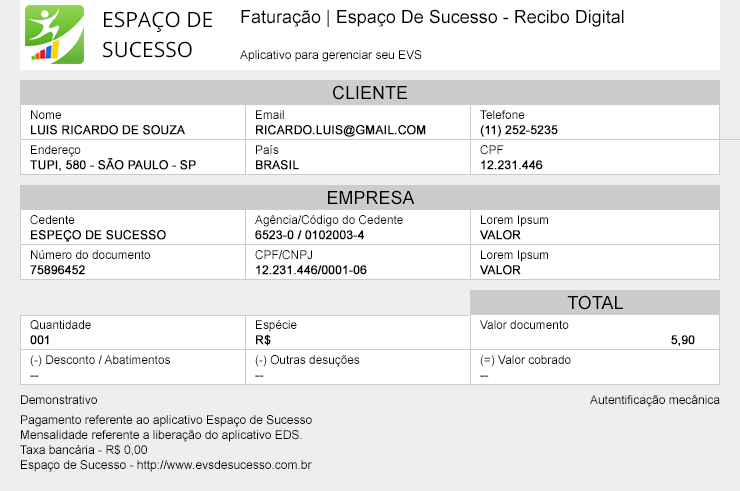
<style>
.page{position:relative;width:740px;height:491px;background:#ffffff}
.page>*{position:absolute;margin:0}
.t1{font:21px/30px "OpenSans";color:#000000;text-transform:uppercase}
.t2{font:18px "ArialMT";color:#000000}
.t3{font:12px "ArialMT";color:#000000}
.t4{font:18px "ArialMT";color:#000000;text-transform:uppercase}
.t5{font:12px/15px "ArialMT";color:#000000;text-transform:uppercase;font-weight:bold}
.t6{font:12px/12px "ArialMT";color:#000000}
.t7{font:12px/15px "ArialMT";color:#000000}
</style>
<div class="page">
<p class="t1" style="left:103px;top:11px;width:109px;height:47px">Espaço de <br>Sucesso</p>
<p class="t2" style="left:241px;top:9px;width:383px;height:18px">Faturação | Espaço De Sucesso - Recibo Digital</p>
<p class="t3" style="left:240px;top:50px;width:182px;height:12px">Aplicativo para gerenciar seu EVS</p>
<p class="t4" style="left:333px;top:85px;width:74px;height:15px">CLIENTE</p>
<p class="t5" style="left:31px;top:110px;width:154px;height:25px"><span class="t6">Nome<br></span>Luis ricardo de souza</p>
<p class="t5" style="left:256px;top:110px;width:170px;height:27px"><span class="t6">Email<br></span>ricardo.luis@gmail.com</p>
<p class="t5" style="left:480px;top:110px;width:78px;height:27px"><span class="t6">Telefone<br></span>(11) 252-5235</p>
<p class="t5" style="left:30px;top:145px;width:166px;height:26px"><span class="t6">Endereço<br></span>Tupi, 580 - São Paulo - SP</p>
<p class="t5" style="left:256px;top:145px;width:43px;height:25px"><span class="t6">País<br></span>Brasil</p>
<p class="t5" style="left:480px;top:145px;width:63px;height:25px"><span class="t6">CPF<br></span>12.231.446</p>
<p class="t4" style="left:328px;top:190px;width:87px;height:15px">Empresa</p>
<p class="t5" style="left:30px;top:215px;width:136px;height:27px"><span class="t6">Cedente<br></span>Espeço de Sucesso</p>
<p class="t6" style="left:255px;top:215px;width:148px;height:25px">Agência/Código do Cedente<br><span class="t5">6523-0 / 0102003-4</span></p>
<p class="t6" style="left:480px;top:215px;width:68px;height:25px">Lorem Ipsum<br><span class="t5">Valor</span></p>
<p class="t6" style="left:30px;top:250px;width:120px;height:25px">Número do documento<br><span class="t5">75896452</span></p>
<p class="t5" style="left:255px;top:250px;width:112px;height:25px"><span class="t6">CPF/CNPJ<br></span>12.231.446/0001-06</p>
<p class="t6" style="left:480px;top:250px;width:68px;height:25px">Lorem Ipsum<br><span class="t5">Valor</span></p>
<p class="t4" style="left:567px;top:295px;width:56px;height:15px">total</p>
<p class="t6" style="left:30px;top:320px;width:61px;height:25px">Quantidade<br><span class="t5">001</span></p>
<p class="t6" style="left:256px;top:320px;width:41px;height:26px">Espécie<br><span class="t5">R$</span></p>
<p class="t6" style="left:480px;top:320px;width:215px;height:26px">Valor documento<br><span class="t5">5,90</span></p>
<p class="t6" style="left:30px;top:355px;width:140px;height:22px">(-) Desconto / Abatimentos<br><span class="t5">--</span></p>
<p class="t6" style="left:255px;top:355px;width:105px;height:22px">(-) Outras desuções<br><span class="t5">--</span></p>
<p class="t6" style="left:480px;top:355px;width:91px;height:22px">(=) Valor cobrado<br><span class="t5">--</span></p>
<p class="t3" style="left:21px;top:395px;width:76px;height:9px">Demonstrativo</p>
<p class="t3" style="left:590px;top:395px;width:130px;height:12px">Autentificação mecânica</p>
<p class="t7" style="left:20px;top:415px;width:292px;height:57px">Pagamento referente ao aplicativo Espaço de Sucesso<br>Mensalidade referente a liberação do aplicativo EDS.<br>Taxa bancária - R$ 0,00<br>Espaço de Sucesso - http://www.evsdesucesso.com.br</p>
</div>
